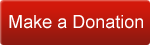
<style>
.page{position:relative;width:150px;height:45px}
.page>*{position:absolute;margin:0}
.t1{font:18px "ArialMT";color:#ffffff}
</style>
<div class="page">
<p class="t1" style="left:9px;top:15px;width:134px;height:14px">Make a Donation</p>
</div>
